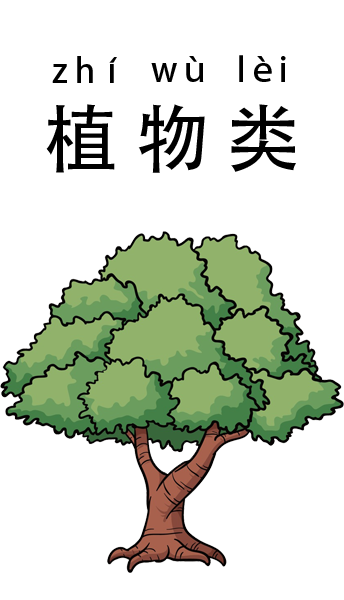
<style>
.page{position:relative;width:344px;height:600px;background:#ffffff}
.page>*{position:absolute;margin:0}
.t1{font:33.3px "AdobeHeitiStd-Regular";color:#000000}
.t2{font:75px "AdobeHeitiStd-Regular";color:#000000}
</style>
<div class="page">
<p class="t1" style="left:52px;top:56px;width:65px;height:27px">z hí</p>
<p class="t1" style="left:151px;top:56px;width:53px;height:26px">wù</p>
<p class="t1" style="left:239px;top:55px;width:47px;height:27px">lèi</p>
<p class="t2" style="left:46px;top:104px;width:250px;height:69px">植 物 类</p>
</div>
